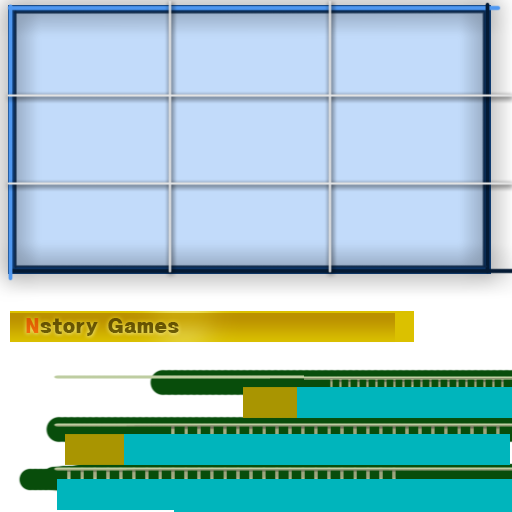
<style>
.page{position:relative;width:512px;height:512px;background:#c2dbfa}
.page>*{position:absolute;margin:0}
.t1{font:18px "HeadlineR-HM";color:#746709}
.t2{font:18px "HeadlineR-HM";color:#ff780b}
</style>
<div class="page">
<p class="t1" style="left:26px;top:318px;width:153px;height:18px"><span class="t2">N</span>story Games</p>
</div>
